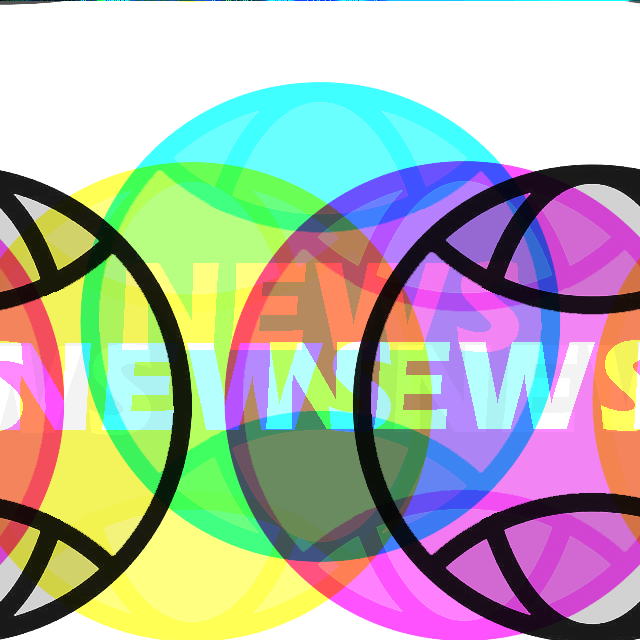
<style>
.page{position:relative;width:640px;height:640px;background:#ffffff}
.page>*{position:absolute;margin:0}
.t1{font:131.2px "ErasITC-Bold"}
</style>
<div class="page">
<p class="t1" style="left:122px;top:260px;width:397px;height:91px">NEWS</p>
</div>
